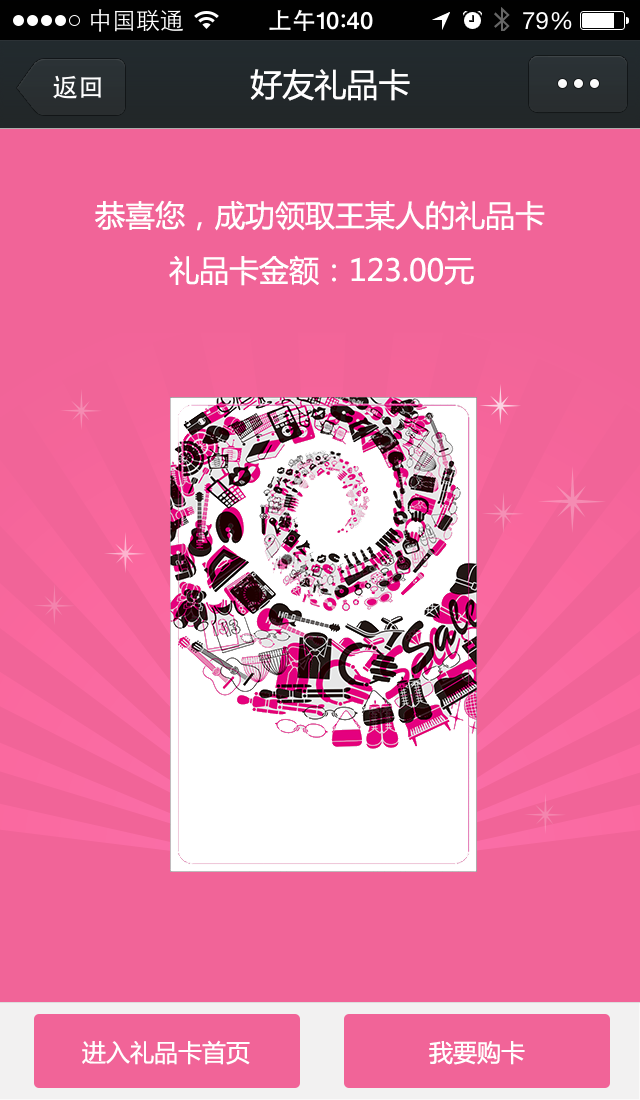
<style>
.page{position:relative;width:640px;height:1100px;background:#f16498}
.page>*{position:absolute;margin:0}
.t1{font:32px "MicrosoftYaHei";color:#ffffff}
.t2{font:30px "MicrosoftYaHei";color:#ffffff}
.t3{font:24px "MicrosoftYaHei";color:#ffffff}
</style>
<div class="page">
<p class="t1" style="left:250px;top:69px;width:160px;height:32px">好友礼品卡</p>
<p class="t2" style="left:95px;top:200px;width:450px;height:31px">恭喜您，成功领取王某人的礼品卡</p>
<p class="t2" style="left:169px;top:255px;width:305px;height:31px">礼品卡金额：123.00元</p>
<p class="t3" style="left:82px;top:1040px;width:168px;height:25px">进入礼品卡首页</p>
<p class="t3" style="left:429px;top:1041px;width:96px;height:24px">我要购卡</p>
</div>
